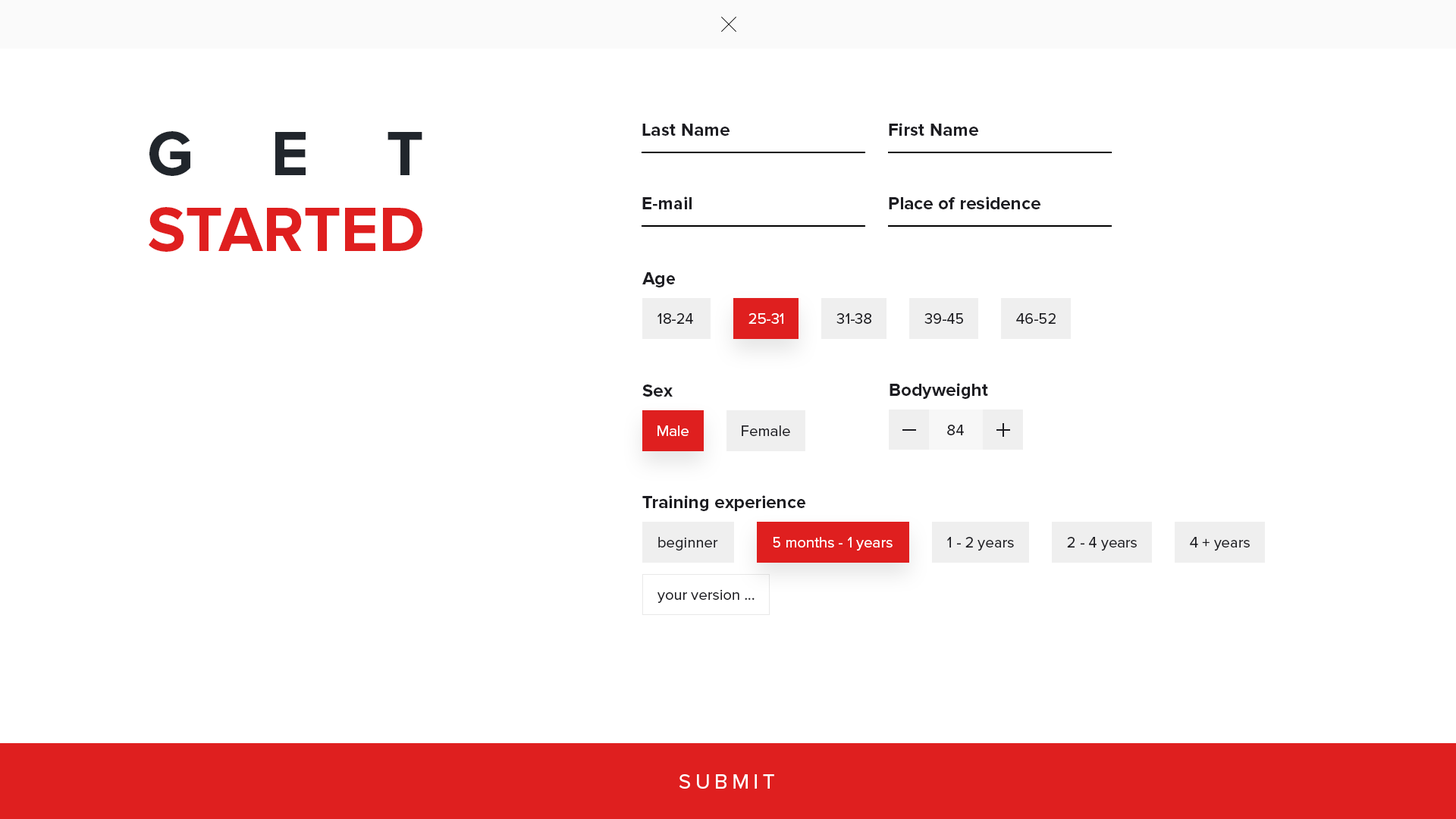
<style>
.page{position:relative;width:1456px;height:819px;background:#ffffff}
.page>*{position:absolute;margin:0}
.t1{font:18.2px "ProximaNova-Bold";letter-spacing:0.005em;color:#1d1d22}
.t2{font:64.5px/75.8px "ProximaNova-Bold";color:#df1f1f}
.t3{font:64.5px/75.8px "ProximaNova-Bold";letter-spacing:1.2em;color:#21262c}
.t4{font:15.2px "ProximaNova-Regular";letter-spacing:0.005em;color:#1d1d22}
.t5{font:15.2px "ProximaNova-Regular";letter-spacing:0.005em;color:#ffffff}
.t6{font:21.2px "ProximaNova-Regular";letter-spacing:0.2em;color:#ffffff}
</style>
<div class="page">
<p class="t1" style="left:642px;top:124px;width:88px;height:12px">Last Name</p>
<p class="t1" style="left:889px;top:123px;width:89px;height:13px">First Name</p>
<p class="t2" style="left:149px;top:131px;width:273px;height:121px"><span class="t3">GET<br></span>STARTED</p>
<p class="t1" style="left:642px;top:196px;width:50px;height:13px">E-mail</p>
<p class="t1" style="left:889px;top:196px;width:151px;height:13px">Place of residence</p>
<p class="t1" style="left:642px;top:272px;width:33px;height:15px">Age</p>
<p class="t4" style="left:657px;top:313px;width:36px;height:11px">18-24</p>
<p class="t5" style="left:748px;top:313px;width:35px;height:11px">25-31</p>
<p class="t4" style="left:836px;top:313px;width:35px;height:11px">31-38</p>
<p class="t4" style="left:924px;top:313px;width:39px;height:11px">39-45</p>
<p class="t4" style="left:1016px;top:313px;width:40px;height:11px">46-52</p>
<p class="t1" style="left:642px;top:384px;width:31px;height:13px">Sex</p>
<p class="t1" style="left:890px;top:383px;width:98px;height:16px">Bodyweight</p>
<p class="t5" style="left:657px;top:425px;width:32px;height:11px">Male</p>
<p class="t4" style="left:742px;top:425px;width:48px;height:11px">Female</p>
<p class="t4" style="left:947px;top:425px;width:17px;height:10px">84</p>
<p class="t1" style="left:642px;top:495px;width:163px;height:16px">Training experience</p>
<p class="t4" style="left:658px;top:537px;width:60px;height:14px">beginner</p>
<p class="t5" style="left:773px;top:537px;width:120px;height:14px">5 months - 1 years</p>
<p class="t4" style="left:947px;top:537px;width:67px;height:14px">1 - 2 years</p>
<p class="t4" style="left:1067px;top:537px;width:70px;height:14px">2 - 4 years</p>
<p class="t4" style="left:1190px;top:537px;width:60px;height:14px">4 + years</p>
<p class="t4" style="left:657px;top:589px;width:98px;height:14px">your version ...</p>
<p class="t6" style="left:679px;top:774px;width:95px;height:15px">SUBMIT</p>
</div>
